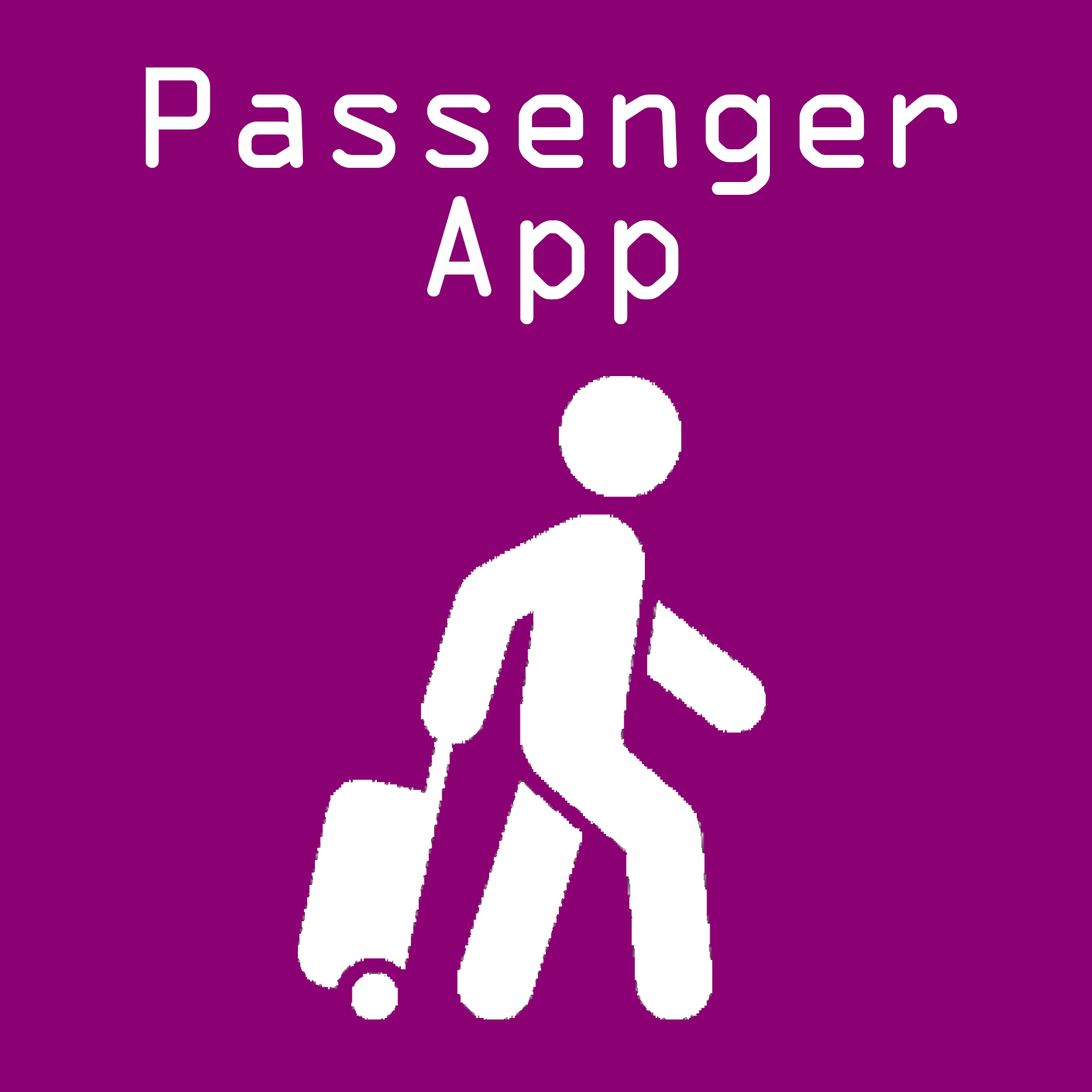
<style>
.page{position:relative;width:1092px;height:1092px;background:#8b0073}
.page>*{position:absolute;margin:0}
.t1{font:154.7px "OCRAExtended";color:#ffffff}
</style>
<div class="page">
<p class="t1" style="left:146px;top:67px;width:812px;height:128px">Passenger</p>
<p class="t1" style="left:427px;top:196px;width:252px;height:128px">App</p>
</div>
